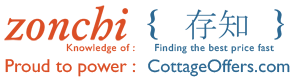
<style>
.page{position:relative;width:290px;height:80px;background:#ffffff}
.page>*{position:absolute;margin:0}
.t1{font:10.2px "GillSansMT";letter-spacing:0.05em;color:#2d6993}
.t2{font:10.2px "GillSansMT";letter-spacing:0.05em;color:#dc4f26}
.t3{font:18.8px "GillSansMT";color:#dc4f26}
.t4{font:18.3px "GillSansMT";color:#2d6993}
</style>
<div class="page">
<p class="t1" style="left:66px;top:43px;width:208px;height:11px"><span class="t2">Knowledge of :      </span>Finding the best price fast</p>
<p class="t3" style="left:5px;top:59px;width:131px;height:18px">Proud to power :</p>
<p class="t4" style="left:148px;top:59px;width:142px;height:18px">CottageOffers.com</p>
</div>
